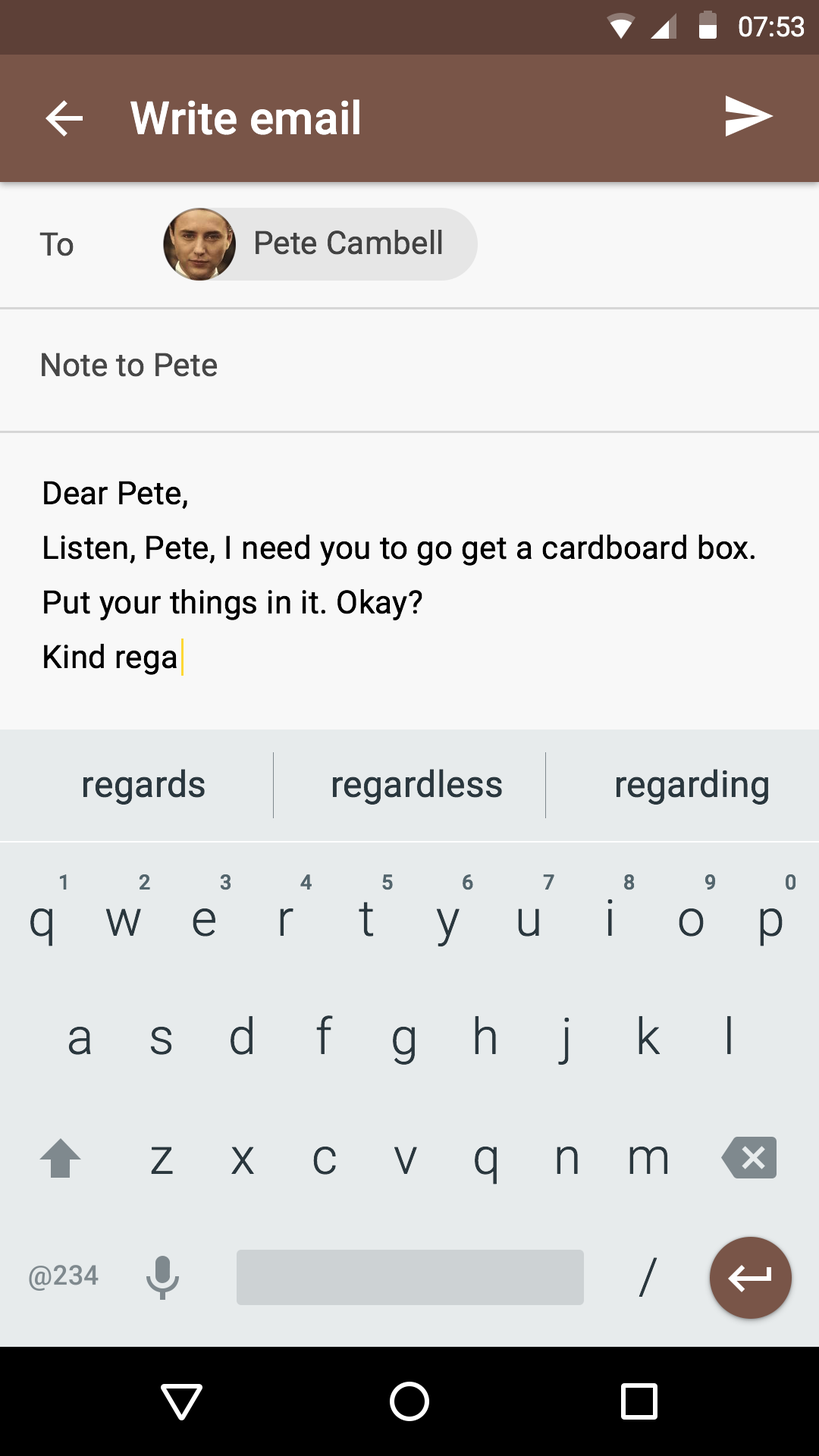
<style>
.page{position:relative;width:819px;height:1456px;background:#e7ebec}
.page>*{position:absolute;margin:0}
.t1{font:27.3px "Roboto-Regular";color:#ffffff}
.t2{font:45.5px "Roboto-Medium";letter-spacing:0.005em;color:#ffffff}
.t3{font:31.8px "Roboto-Regular";letter-spacing:0.01em;color:#474747}
.t4{font:31.8px "Roboto-Regular";letter-spacing:0.01em;color:#424242}
.t5{font:31.8px/54.6px "Roboto-Regular";letter-spacing:0.01em;color:#000000}
.t6{font:36.4px "Roboto-Regular";letter-spacing:0.01em;color:#2a373e}
.t7{font:20.5px "Roboto-Medium";color:#53656d}
.t8{font:50px "Roboto-Light";color:#2a373e}
</style>
<div class="page">
<p class="t1" style="left:739px;top:16px;width:66px;height:21px">07:53</p>
<p class="t2" style="left:130px;top:99px;width:229px;height:36px">Write email</p>
<p class="t3" style="left:39px;top:232px;width:35px;height:24px">To</p>
<p class="t4" style="left:256px;top:229px;width:186px;height:26px">Pete Cambell</p>
<p class="t3" style="left:42px;top:353px;width:176px;height:24px">Note to Pete</p>
<p class="t5" style="left:44px;top:481px;width:711px;height:194px">Dear Pete,<br>Listen, Pete, I need you to go get a cardboard box. Put your things in it. Okay?<br>Kind rega</p>
<p class="t6" style="left:83px;top:769px;width:122px;height:36px">regards</p>
<p class="t6" style="left:332px;top:769px;width:170px;height:36px">regardless</p>
<p class="t6" style="left:616px;top:769px;width:152px;height:36px">regarding</p>
<p class="t7" style="left:59px;top:874px;width:8px;height:16px">1</p>
<p class="t7" style="left:139px;top:874px;width:11px;height:16px">2</p>
<p class="t7" style="left:220px;top:874px;width:11px;height:16px">3</p>
<p class="t7" style="left:300px;top:874px;width:12px;height:16px">4</p>
<p class="t7" style="left:382px;top:874px;width:11px;height:16px">5</p>
<p class="t7" style="left:463px;top:874px;width:10px;height:16px">6</p>
<p class="t7" style="left:543px;top:874px;width:11px;height:16px">7</p>
<p class="t7" style="left:624px;top:874px;width:11px;height:16px">8</p>
<p class="t7" style="left:704px;top:874px;width:12px;height:16px">9</p>
<p class="t7" style="left:786px;top:874px;width:10px;height:16px">0</p>
<p class="t8" style="left:359px;top:902px;width:15px;height:35px">t</p>
<p class="t8" style="left:607px;top:899px;width:6px;height:37px">i</p>
<p class="t8" style="left:30px;top:908px;width:22px;height:38px">q</p>
<p class="t8" style="left:105px;top:908px;width:36px;height:28px">w</p>
<p class="t8" style="left:193px;top:908px;width:22px;height:29px">e</p>
<p class="t8" style="left:280px;top:908px;width:13px;height:28px">r</p>
<p class="t8" style="left:436px;top:908px;width:24px;height:39px">y</p>
<p class="t8" style="left:518px;top:908px;width:21px;height:29px">u</p>
<p class="t8" style="left:679px;top:908px;width:25px;height:29px">o</p>
<p class="t8" style="left:760px;top:908px;width:23px;height:38px">p</p>
<p class="t8" style="left:231px;top:1015px;width:22px;height:40px">d</p>
<p class="t8" style="left:316px;top:1015px;width:17px;height:39px">f</p>
<p class="t8" style="left:475px;top:1015px;width:21px;height:39px">h</p>
<p class="t8" style="left:558px;top:1017px;width:12px;height:48px">j</p>
<p class="t8" style="left:639px;top:1015px;width:21px;height:39px">k</p>
<p class="t8" style="left:727px;top:1015px;width:4px;height:39px">l</p>
<p class="t8" style="left:68px;top:1026px;width:23px;height:29px">a</p>
<p class="t8" style="left:150px;top:1026px;width:22px;height:29px">s</p>
<p class="t8" style="left:393px;top:1026px;width:22px;height:39px">g</p>
<p class="t8" style="left:313px;top:1146px;width:23px;height:29px">c</p>
<p class="t8" style="left:475px;top:1146px;width:22px;height:39px">q</p>
<p class="t8" style="left:557px;top:1146px;width:21px;height:28px">n</p>
<p class="t8" style="left:629px;top:1146px;width:39px;height:28px">m</p>
<p class="t8" style="left:151px;top:1147px;width:22px;height:27px">z</p>
<p class="t8" style="left:231px;top:1147px;width:23px;height:27px">x</p>
<p class="t8" style="left:394px;top:1147px;width:23px;height:27px">v</p>
<p class="t8" style="left:639px;top:1257px;width:18px;height:40px">/</p>
</div>
